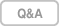
<style>
.page{position:relative;width:59px;height:26px;background:#ffffff}
.page>*{position:absolute;margin:0}
.t1{font:12px "H2gtrE";letter-spacing:-0.075em;color:#989898;scale:0.95 1}
</style>
<div class="page">
<p class="t1" style="left:17px;top:8px;width:26px;height:11px">Q&amp;A</p>
</div>
